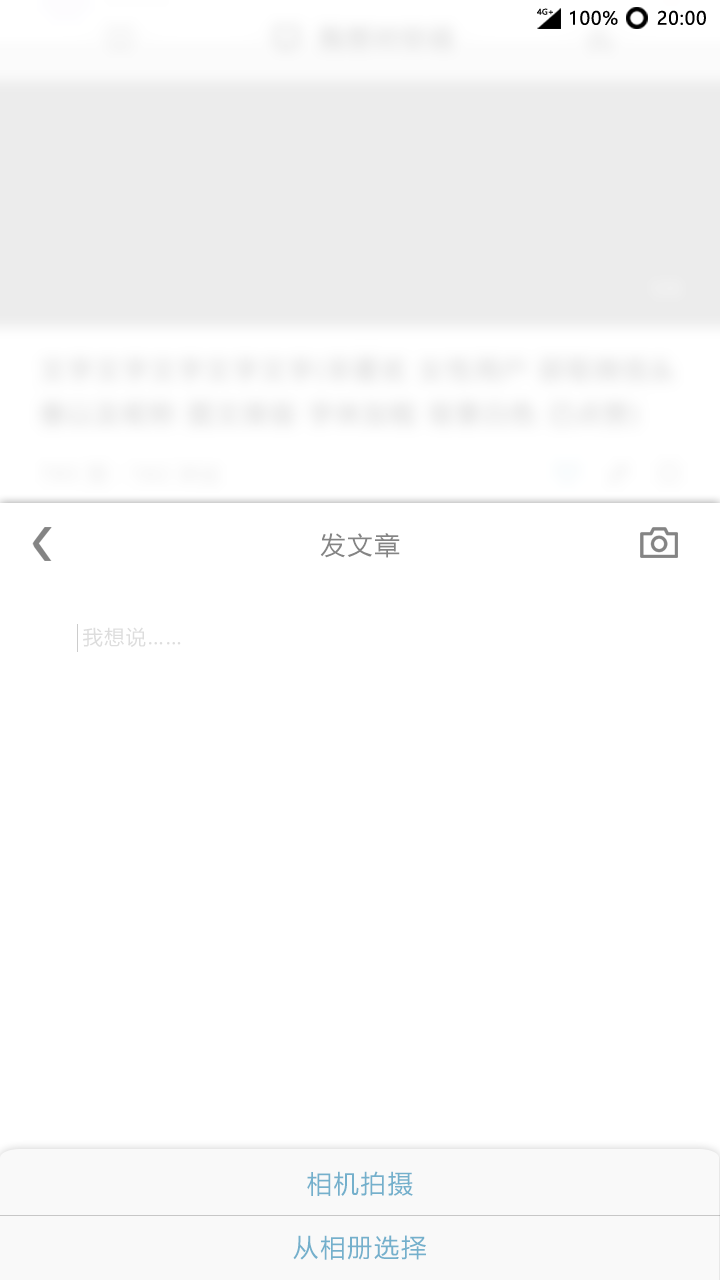
<style>
.page{position:relative;width:720px;height:1280px;background:#ffffff}
.page>*{position:absolute;margin:0}
.t1{font:7.8px "MicrosoftYaHei";letter-spacing:0.01em;color:#0f0f0f;scale:1.03 1}
.t2{font:18px "MicrosoftYaHei";letter-spacing:0.05em;color:#000000}
.t3{font:25px "MicrosoftYaHei";letter-spacing:0.08em;color:#848484}
.t4{font:20px "MicrosoftYaHei";letter-spacing:0.08em;color:#dddddd}
.t5{font:25px "MicrosoftYaHei";letter-spacing:0.08em;color:#74b0cc}
</style>
<div class="page">
<p class="t1" style="left:537px;top:8px;width:16px;height:7px">4G+</p>
<p class="t2" style="left:570px;top:10px;width:48px;height:15px">100%</p>
<p class="t2" style="left:657px;top:10px;width:49px;height:15px">20:00</p>
<p class="t3" style="left:320px;top:533px;width:80px;height:25px">发文章</p>
<p class="t4" style="left:83px;top:627px;width:98px;height:20px">我想说……</p>
<p class="t5" style="left:293px;top:1171px;width:133px;height:89px;text-align:center">相机拍摄<br>从相册选择</p>
</div>
